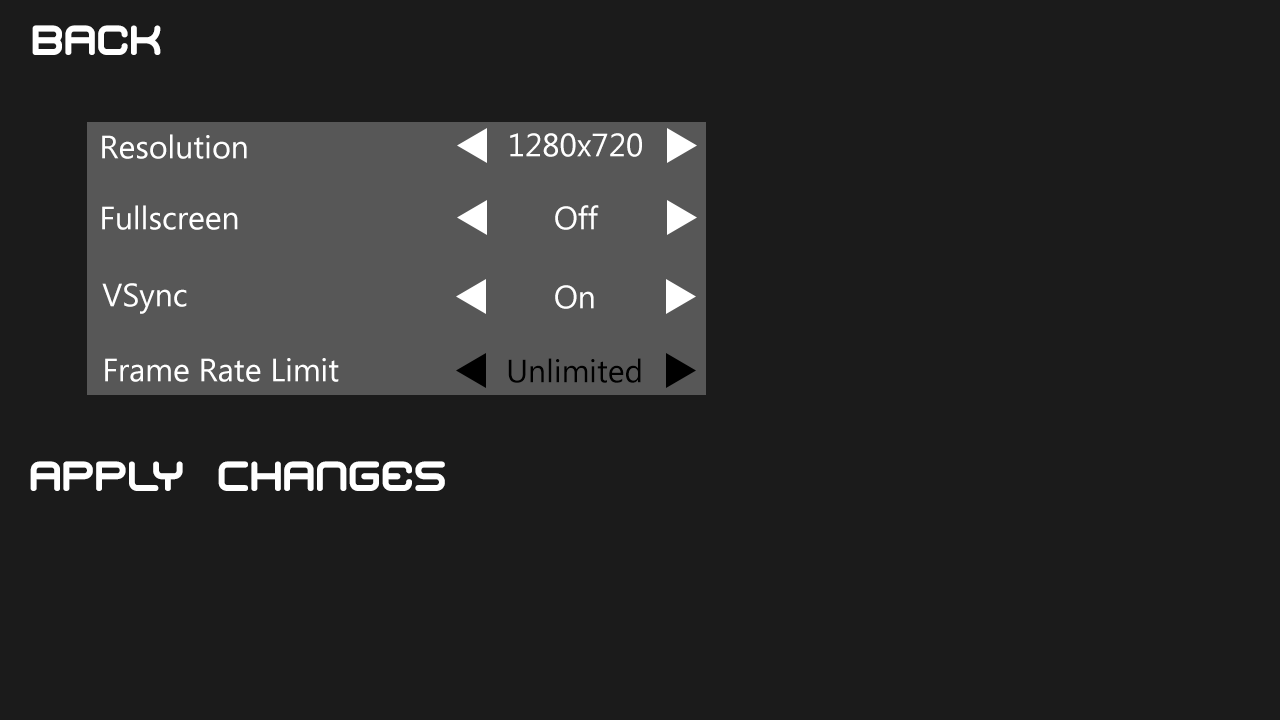
<style>
.page{position:relative;width:1280px;height:720px;background:#1b1b1b}
.page>*{position:absolute;margin:0}
.t1{font:42px "MishmashBRK";color:#ffffff}
.t2{font:32px "MicrosoftTaiLe";color:#ffffff}
.t3{font:32px "MicrosoftTaiLe";color:#000000}
</style>
<div class="page">
<p class="t1" style="left:32px;top:25px;width:129px;height:30px">Back</p>
<p class="t2" style="left:102px;top:134px;width:145px;height:25px">Resolution</p>
<p class="t2" style="left:510px;top:133px;width:132px;height:24px">1280x720</p>
<p class="t2" style="left:102px;top:205px;width:136px;height:25px">Fullscreen</p>
<p class="t2" style="left:555px;top:205px;width:44px;height:25px">Off</p>
<p class="t2" style="left:102px;top:283px;width:85px;height:31px">VSync</p>
<p class="t2" style="left:555px;top:285px;width:39px;height:24px">On</p>
<p class="t2" style="left:105px;top:358px;width:234px;height:24px">Frame Rate Limit</p>
<p class="t3" style="left:508px;top:358px;width:133px;height:25px">Unlimited</p>
<p class="t1" style="left:30px;top:461px;width:415px;height:30px">Apply Changes</p>
</div>
